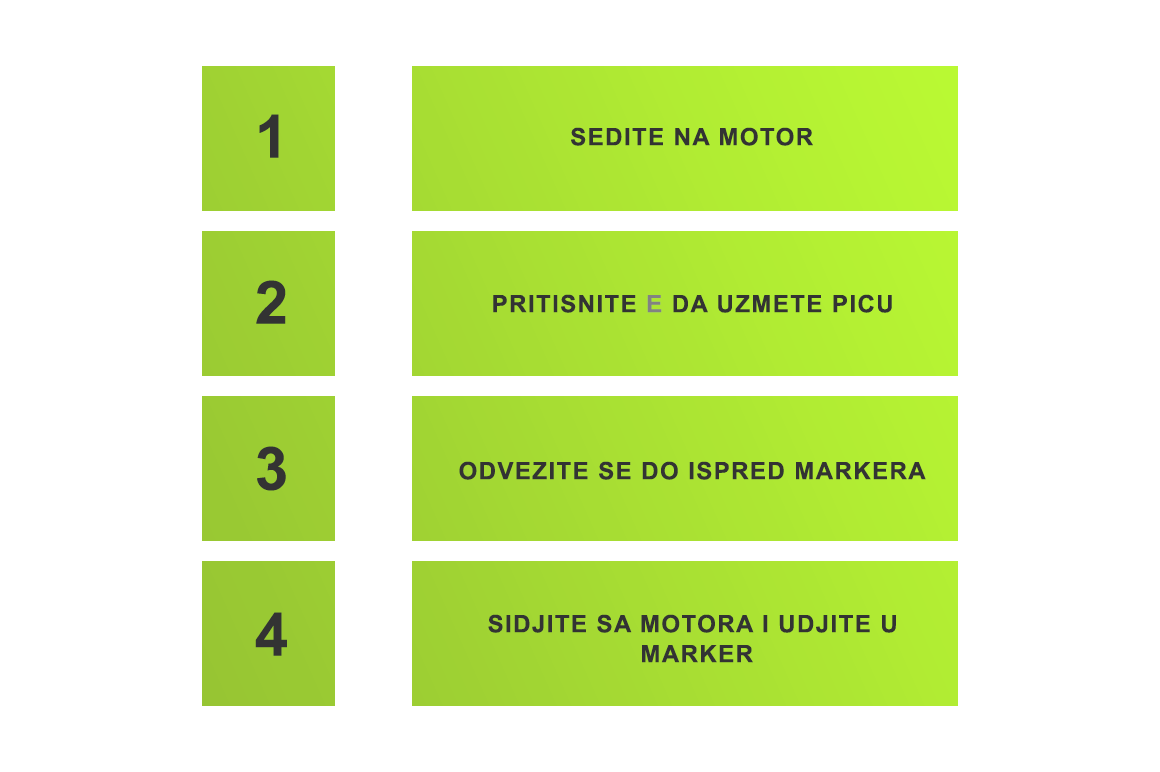
<style>
.page{position:relative;width:1160px;height:772px;background:#ffffff}
.page>*{position:absolute;margin:0}
.t1{font:60px "Arial-BoldMT";letter-spacing:0.06em;color:#333333;text-transform:uppercase}
.t2{font:24px "Arial-BoldMT";letter-spacing:0.06em;color:#333333;text-transform:uppercase}
.t3{font:24px "Arial-BoldMT";letter-spacing:0.06em;color:#828282;text-transform:uppercase}
.t4{font:24px/15px "Arial-BoldMT";letter-spacing:0.06em;color:#333333;text-transform:uppercase}
</style>
<div class="page">
<p class="t1" style="left:259px;top:114px;width:20px;height:44px">1</p>
<p class="t2" style="left:571px;top:127px;width:242px;height:19px">Sedite na motor</p>
<p class="t1" style="left:256px;top:280px;width:30px;height:44px">2</p>
<p class="t2" style="left:493px;top:294px;width:399px;height:19px">PRITISNITE <span class="t3">E</span> DA UZMETE PICU</p>
<p class="t1" style="left:257px;top:446px;width:29px;height:45px">3</p>
<p class="t2" style="left:459px;top:461px;width:467px;height:19px">ODVEZITE SE DO ISPRED MARKERA</p>
<p class="t1" style="left:255px;top:612px;width:32px;height:44px">4</p>
<p class="t4" style="left:488px;top:614px;width:408px;height:49px;text-align:center">SIDJITE SA MOTORA I UDJITE U<br><br> MARKER</p>
</div>
